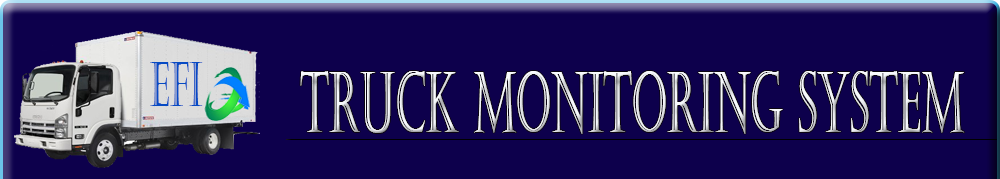
<style>
.page{position:relative;width:1000px;height:179px;background:#0d004c}
.page>*{position:absolute;margin:0}
.t1{font:62.1px "Castellar";color:#074ac4;scale:0.55 1}
.t2{font:83.7px "Castellar";color:#f6f8fc;scale:0.48 1}
</style>
<div class="page">
<p class="t1" style="left:150px;top:62px;width:53px;height:44px">EFI</p>
<p class="t2" style="left:300px;top:71px;width:665px;height:63px">TRUCK MONITORING SYSTEM</p>
</div>
